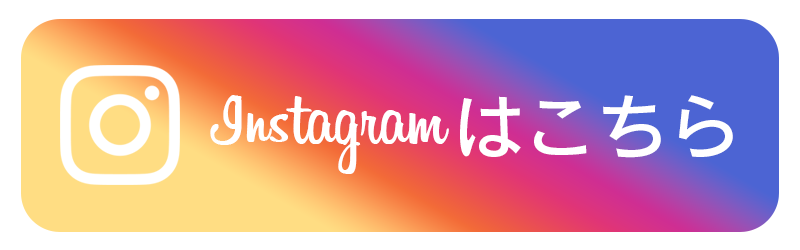
<style>
.page{position:relative;width:800px;height:250px;background:#ffffff}
.page>*{position:absolute;margin:0}
.t1{font:75px "Billabong";color:#ffffff}
.t2{font:72px "RodinProN-DB";color:#ffffff}
</style>
<div class="page">
<p class="t1" style="left:210px;top:95px;width:239px;height:79px">Instagram</p>
<p class="t2" style="left:460px;top:95px;width:273px;height:63px">はこちら</p>
</div>
